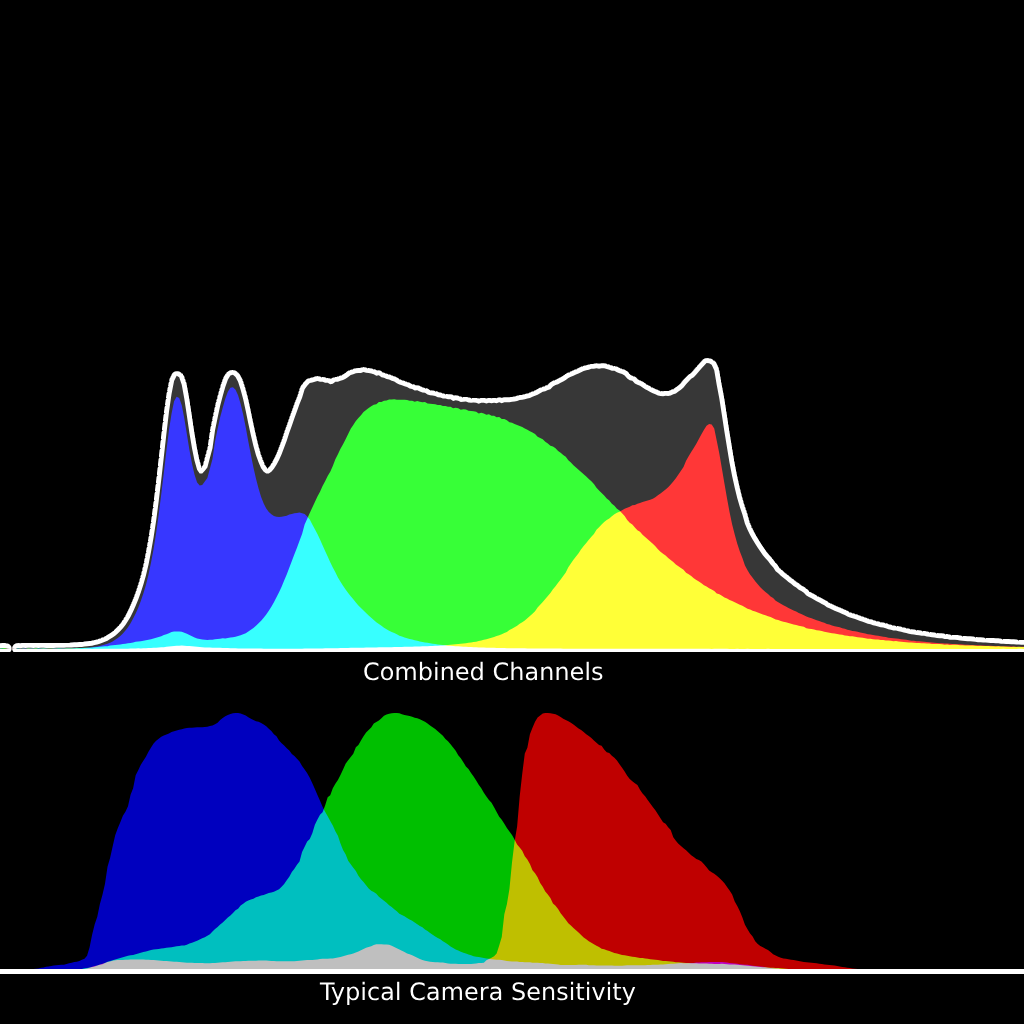
<style>
.page{position:relative;width:1024px;height:1024px;background:#000000}
.page>*{position:absolute;margin:0}
.t1{font:24px "DejaVuSans";color:#ffffff}
</style>
<div class="page">
<p class="t1" style="left:364px;top:661px;width:239px;height:20px">Combined Channels</p>
<p class="t1" style="left:319px;top:981px;width:317px;height:24px">Typical Camera Sensitivity</p>
</div>
